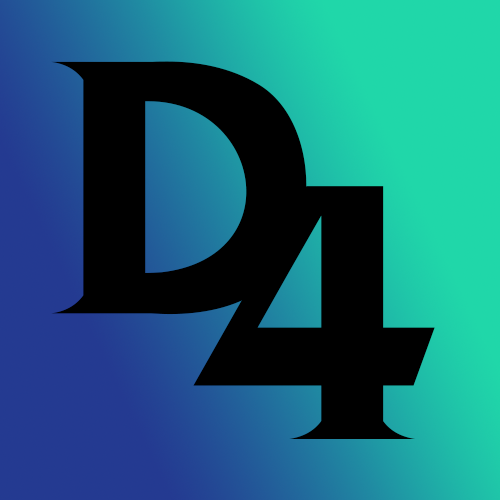
<style>
.page{position:relative;width:500px;height:500px;background:#000000}
.page>*{position:absolute;margin:0}
.t1{font:344.9px "DRAGONHUNTER";letter-spacing:0.01em;color:#000000;scale:1.07 1}
</style>
<div class="page">
<p class="t1" style="left:51px;top:61px;width:256px;height:254px">D</p>
<p class="t1" style="left:193px;top:186px;width:242px;height:253px">4</p>
</div>
